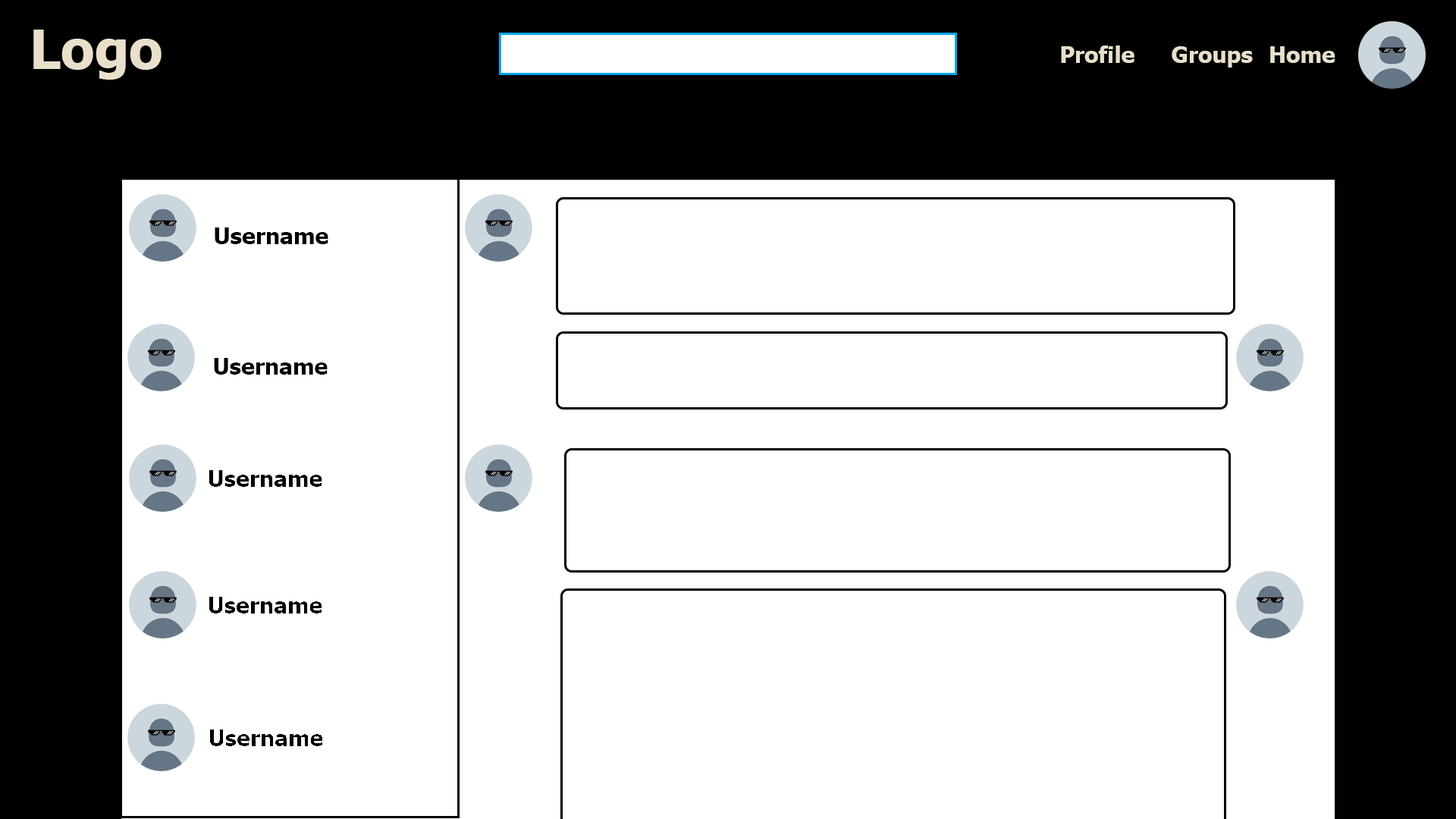
<style>
.page{position:relative;width:1456px;height:819px;background:#ffffff}
.page>*{position:absolute;margin:0}
.t1{font:54.6px "Tahoma-Bold";color:#e8e0cb}
.t2{font:22.7px "Tahoma-Bold";color:#e8e0cb}
.t3{font:22.7px "Tahoma-Bold";color:#000000}
</style>
<div class="page">
<p class="t1" style="left:33px;top:30px;width:129px;height:50px">Logo</p>
<p class="t2" style="left:1061px;top:45px;width:73px;height:18px">Profile</p>
<p class="t2" style="left:1172px;top:46px;width:81px;height:21px">Groups</p>
<p class="t2" style="left:1270px;top:46px;width:65px;height:17px">Home</p>
<p class="t3" style="left:215px;top:227px;width:113px;height:17px">Username</p>
</div>
